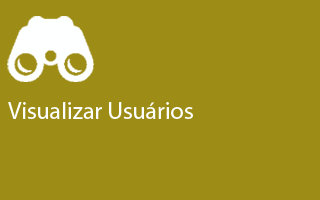
<style>
.page{position:relative;width:320px;height:200px;background:#9d8c16}
.page>*{position:absolute;margin:0}
.t1{font:24px "MyriadPro-Regular";color:#feffff}
</style>
<div class="page">
<p class="t1" style="left:8px;top:102px;width:185px;height:17px">Visualizar Usuários</p>
</div>
